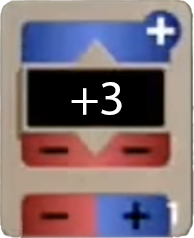
<style>
.page{position:relative;width:194px;height:238px}
.page>*{position:absolute;margin:0}
.t1{font:50px "MyriadPro-Regular";color:#ffffff}
</style>
<div class="page">
<p class="t1" style="left:71px;top:82px;width:51px;height:33px">+3</p>
</div>
